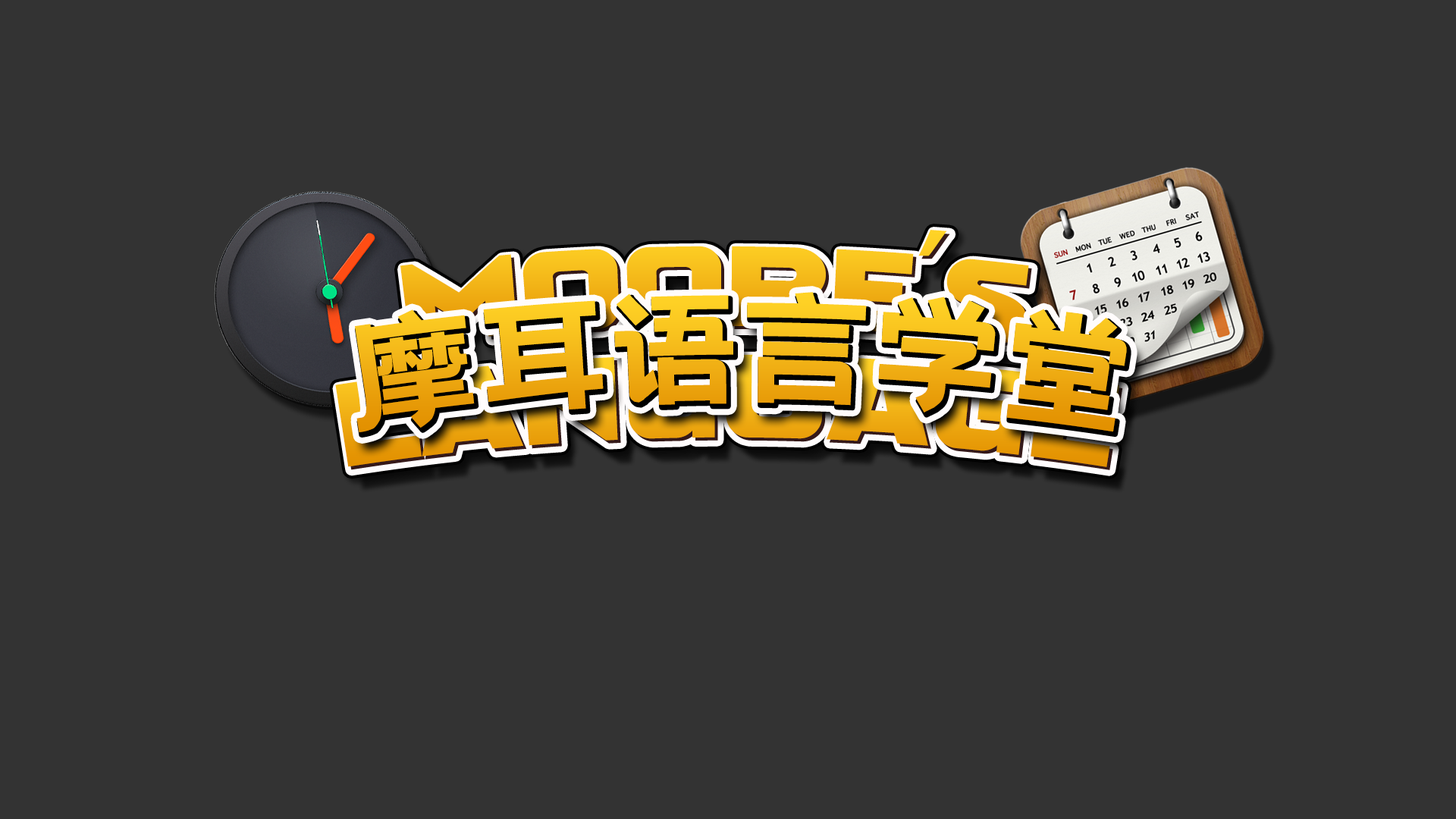
<style>
.page{position:relative;width:1456px;height:819px;background:#333333}
.page>*{position:absolute;margin:0}
.t1{font:113.7px "GOVERRegular";color:#f8c11e}
.t2{font:113.7px "AdobeHeitiStd-Regular";color:#f8c11e}
.t3{font:126.7px "HelloFont-WenYiHei"}
</style>
<div class="page">
<p class="t1" style="left:400px;top:230px;width:629px;height:115px">MOORE<span class="t2">'</span>S</p>
<p class="t3" style="left:355px;top:292px;width:772px;height:140px">摩耳语言学堂</p>
</div>
